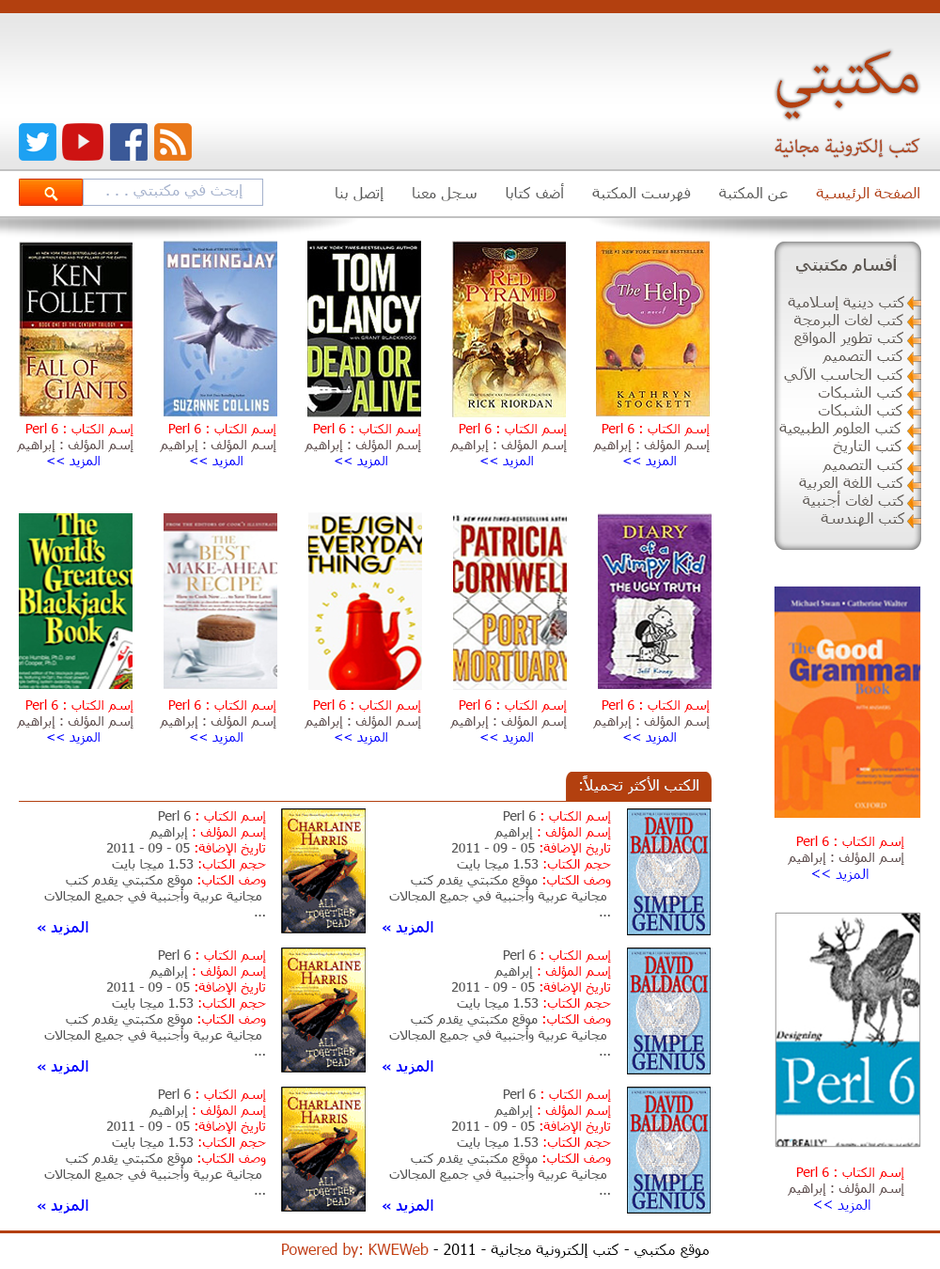
<style>
.page{position:relative;width:940px;height:1269px;background:#ffffff}
.page>*{position:absolute;margin:0}
.t1{font:78.9px "AdobeArabic-Regular";color:#b3400f}
.t2{font:26.3px "AdobeArabic-Regular";color:#b3400f}
.t3{font:15px "Tahoma";color:#a5b2cd}
.t4{font:15px "Tahoma";color:#595958}
.t5{font:15px "Tahoma";color:#b3400f}
.t6{font:15px "Tahoma";color:#605a55}
.t7{font:15px "Tahoma-Bold";color:#605a55}
.t8{font:13.2px "Tahoma";color:#655555}
.t9{font:13.2px "Tahoma";color:#ff0000}
.t10{font:13.2px "Tahoma";color:#0000ff}
.t11{font:15px "Tahoma";color:#f3ffff}
.t12{font:13.2px/16px "Tahoma";color:#555555}
.t13{font:13.2px/16px "Tahoma";color:#ff0000}
.t14{font:14.1px/16px "Tahoma-Bold";color:#0000ff}
.t15{font:14.1px "Tahoma";color:#0000ff}
.t16{font:15px "Tahoma";color:#000000}
.t17{font:15px "Tahoma";color:#c4400f}
</style>
<div class="page">
<p class="t1" style="left:776px;top:51px;width:142px;height:68px">مكتبتي</p>
<p class="t2" style="left:774px;top:138px;width:146px;height:20px">كتب إلكترونية مجانية</p>
<p class="t3" style="left:106px;top:184px;width:136px;height:14px">. . . إبحث في مكتبتي</p>
<p class="t4" style="left:336px;top:183px;width:583px;height:19px"><span class="t5">الصفحة الرئيسية      </span>عن المكتبة      فهرست المكتبة      أضف كتابا      سجل معنا      إتصل بنا</p>
<p class="t6" style="left:779px;top:255px;width:126px;height:271px;text-align:center"><span class="t7">أقسام مكتبتي<br></span><br>كتب دينية إسلامية<br> كتب لغات البرمجة<br> كتب تطوير المواقع<br>       كتب التصميم<br>  كتب الحاسب الآلي<br>      كتب الشبكات<br>      كتب الشبكات <br> كتب العلوم الطبيعية<br>         كتب التاريخ<br>       كتب التصميم<br>  كتب اللغة العربية<br>   كتب لغات أجنبية<br>       كتب الهندسة</p>
<p class="t8" style="left:17px;top:423px;width:116px;height:46px;text-align:right"><span class="t9"> Perl 6 : إسم الكتاب<br></span>إسم المؤلف : إبراهيم<br><span class="t10">&lt;&lt; المزيد</span></p>
<p class="t8" style="left:160px;top:423px;width:116px;height:46px;text-align:right"><span class="t9"> Perl 6 : إسم الكتاب<br></span>إسم المؤلف : إبراهيم<br><span class="t10">&lt;&lt; المزيد</span></p>
<p class="t8" style="left:305px;top:423px;width:116px;height:46px;text-align:right"><span class="t9"> Perl 6 : إسم الكتاب<br></span>إسم المؤلف : إبراهيم<br><span class="t10">&lt;&lt; المزيد</span></p>
<p class="t8" style="left:450px;top:423px;width:117px;height:46px;text-align:right"><span class="t9"> Perl 6 : إسم الكتاب<br></span>إسم المؤلف : إبراهيم<br><span class="t10">&lt;&lt; المزيد</span></p>
<p class="t8" style="left:593px;top:423px;width:117px;height:46px;text-align:right"><span class="t9"> Perl 6 : إسم الكتاب<br></span>إسم المؤلف : إبراهيم<br><span class="t10">&lt;&lt; المزيد</span></p>
<p class="t8" style="left:17px;top:699px;width:116px;height:46px;text-align:right"><span class="t9"> Perl 6 : إسم الكتاب<br></span>إسم المؤلف : إبراهيم<br><span class="t10">&lt;&lt; المزيد</span></p>
<p class="t8" style="left:160px;top:699px;width:116px;height:46px;text-align:right"><span class="t9"> Perl 6 : إسم الكتاب<br></span>إسم المؤلف : إبراهيم<br><span class="t10">&lt;&lt; المزيد</span></p>
<p class="t8" style="left:305px;top:699px;width:116px;height:46px;text-align:right"><span class="t9"> Perl 6 : إسم الكتاب<br></span>إسم المؤلف : إبراهيم<br><span class="t10">&lt;&lt; المزيد</span></p>
<p class="t8" style="left:450px;top:699px;width:117px;height:46px;text-align:right"><span class="t9"> Perl 6 : إسم الكتاب<br></span>إسم المؤلف : إبراهيم<br><span class="t10">&lt;&lt; المزيد</span></p>
<p class="t8" style="left:593px;top:699px;width:117px;height:46px;text-align:right"><span class="t9"> Perl 6 : إسم الكتاب<br></span>إسم المؤلف : إبراهيم<br><span class="t10">&lt;&lt; المزيد</span></p>
<p class="t11" style="left:580px;top:775px;width:118px;height:19px">:الكتب الأكثر تحميلاً</p>
<p class="t12" style="left:37px;top:810px;width:229px;height:125px"><span class="t13">إسم الكتاب : </span>Perl 6<br><span class="t13">إسم المؤلف : </span>إبراهيم<br><span class="t13">تاريخ الإضافة: </span>05 - 09 - 2011<br><span class="t13">حجم الكتاب: </span>1.53 ميجا بايت<br><span class="t13">وصف الكتاب: </span>موقع مكتبتي يقدم كتب<br> مجانية عربية وأجنبية في جميع المجالات <br>...<br>                                           <span class="t14">المزيد »</span></p>
<p class="t12" style="left:382px;top:810px;width:229px;height:125px"><span class="t13">إسم الكتاب : </span>Perl 6<br><span class="t13">إسم المؤلف : </span>إبراهيم<br><span class="t13">تاريخ الإضافة: </span>05 - 09 - 2011<br><span class="t13">حجم الكتاب: </span>1.53 ميجا بايت<br><span class="t13">وصف الكتاب: </span>موقع مكتبتي يقدم كتب<br> مجانية عربية وأجنبية في جميع المجالات <br>...<br>                                           <span class="t14">المزيد »</span></p>
<p class="t8" style="left:788px;top:836px;width:116px;height:47px;text-align:right"><span class="t9"> Perl 6 : إسم الكتاب<br></span>إسم المؤلف : إبراهيم<br><span class="t15">&lt;&lt; المزيد</span></p>
<p class="t12" style="left:37px;top:949px;width:229px;height:125px"><span class="t13">إسم الكتاب : </span>Perl 6<br><span class="t13">إسم المؤلف : </span>إبراهيم<br><span class="t13">تاريخ الإضافة: </span>05 - 09 - 2011<br><span class="t13">حجم الكتاب: </span>1.53 ميجا بايت<br><span class="t13">وصف الكتاب: </span>موقع مكتبتي يقدم كتب<br> مجانية عربية وأجنبية في جميع المجالات <br>...<br>                                           <span class="t14">المزيد »</span></p>
<p class="t12" style="left:382px;top:949px;width:229px;height:125px"><span class="t13">إسم الكتاب : </span>Perl 6<br><span class="t13">إسم المؤلف : </span>إبراهيم<br><span class="t13">تاريخ الإضافة: </span>05 - 09 - 2011<br><span class="t13">حجم الكتاب: </span>1.53 ميجا بايت<br><span class="t13">وصف الكتاب: </span>موقع مكتبتي يقدم كتب<br> مجانية عربية وأجنبية في جميع المجالات <br>...<br>                                           <span class="t14">المزيد »</span></p>
<p class="t12" style="left:37px;top:1088px;width:229px;height:125px"><span class="t13">إسم الكتاب : </span>Perl 6<br><span class="t13">إسم المؤلف : </span>إبراهيم<br><span class="t13">تاريخ الإضافة: </span>05 - 09 - 2011<br><span class="t13">حجم الكتاب: </span>1.53 ميجا بايت<br><span class="t13">وصف الكتاب: </span>موقع مكتبتي يقدم كتب<br> مجانية عربية وأجنبية في جميع المجالات <br>...<br>                                           <span class="t14">المزيد »</span></p>
<p class="t12" style="left:382px;top:1088px;width:229px;height:125px"><span class="t13">إسم الكتاب : </span>Perl 6<br><span class="t13">إسم المؤلف : </span>إبراهيم<br><span class="t13">تاريخ الإضافة: </span>05 - 09 - 2011<br><span class="t13">حجم الكتاب: </span>1.53 ميجا بايت<br><span class="t13">وصف الكتاب: </span>موقع مكتبتي يقدم كتب<br> مجانية عربية وأجنبية في جميع المجالات <br>...<br>                                           <span class="t14">المزيد »</span></p>
<p class="t8" style="left:788px;top:1166px;width:116px;height:47px;text-align:right"><span class="t9"> Perl 6 : إسم الكتاب<br></span>إسم المؤلف : إبراهيم<br><span class="t15">&lt;&lt; المزيد</span></p>
<p class="t16" style="left:282px;top:1242px;width:427px;height:16px">موقع مكتبي - كتب إلكترونية مجانية - 2011 - <span class="t17">Powered by: KWEWeb</span></p>
</div>
